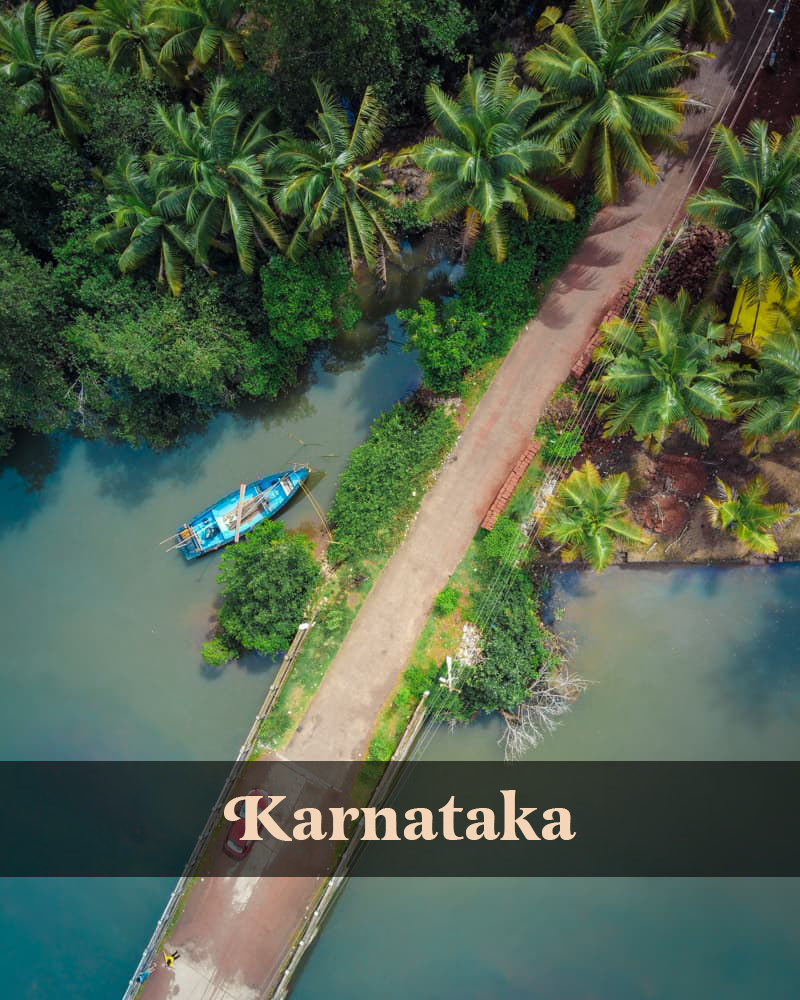
<style>
.page{position:relative;width:800px;height:1000px}
.page>*{position:absolute;margin:0}
.t1{font:65.6px "LatienneBeckerSwash-Bold";color:#f4d5b7}
</style>
<div class="page">
<p class="t1" style="left:224px;top:790px;width:353px;height:51px">Karnataka</p>
</div>
